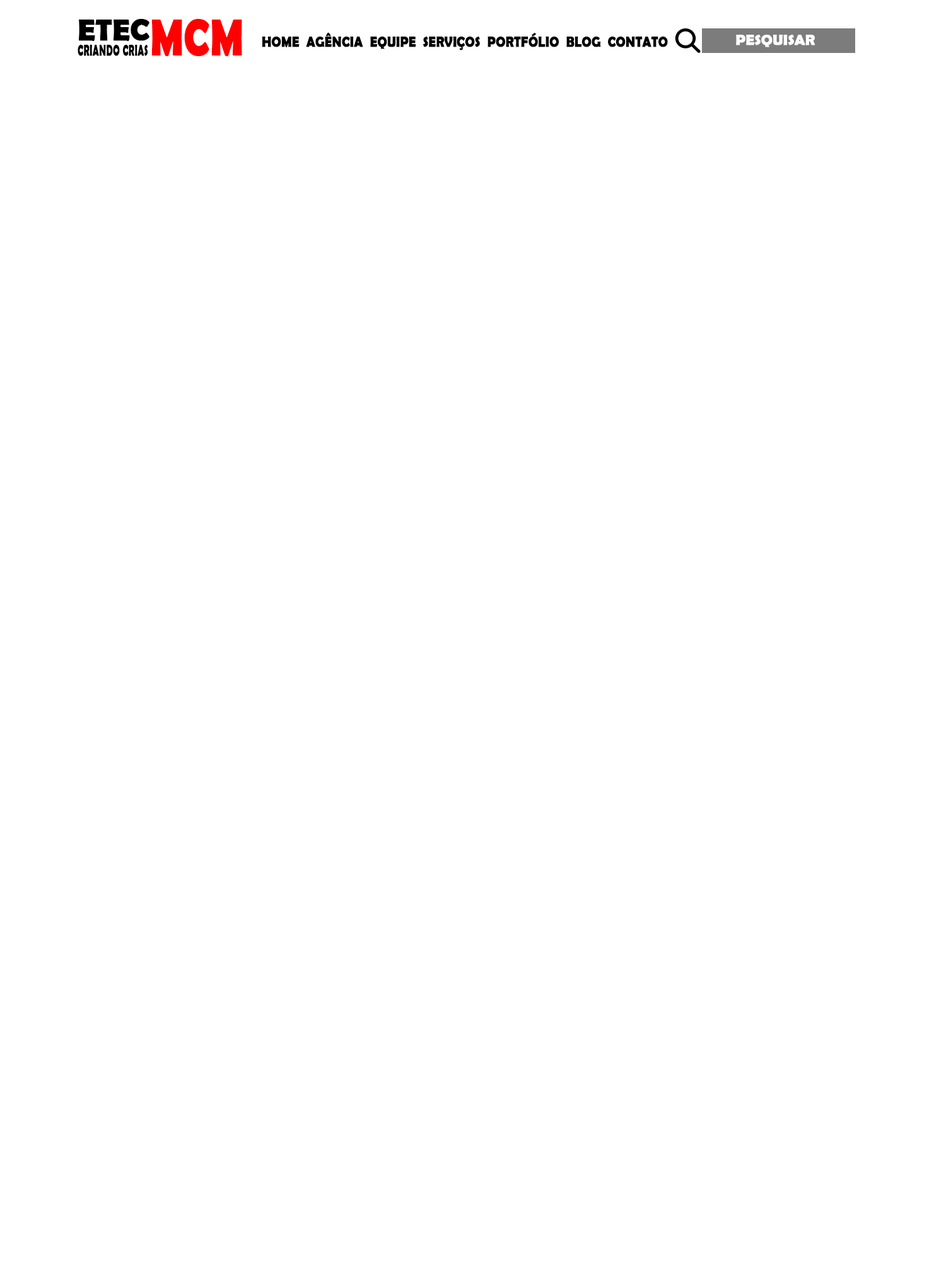
<style>
.page{position:relative;width:946px;height:1261px;background:#ffffff}
.page>*{position:absolute;margin:0}
.t1{font:30.3px "BerlinSansFBDemi-Bold";color:#000000;font-weight:bold}
.t2{font:51.8px "BerlinSansFBDemi-Bold";color:#ff0000;font-weight:bold;scale:0.77 1}
.t3{font:14.9px "BerlinSansFBDemi-Bold";color:#000000;font-weight:bold;scale:0.84 1}
.t4{font:14.9px "BerlinSansFBDemi-Bold";color:#ffffff;font-weight:bold}
.t5{font:15.1px "BerlinSansFBDemi-Bold";color:#7c7c7c;font-weight:bold}
.t6{font:15.7px "BerlinSansFBDemi-Bold";color:#000000;font-weight:bold;scale:0.58 1}
</style>
<div class="page">
<p class="t1" style="left:79px;top:19px;width:70px;height:22px">ETEC</p>
<p class="t2" style="left:151px;top:19px;width:91px;height:37px">MCM</p>
<p class="t3" style="left:262px;top:33px;width:406px;height:17px">HOME  AGÊNCIA  EQUIPE  SERVIÇOS  PORTFÓLIO  BLOG  CONTATO</p>
<p class="t4" style="left:736px;top:35px;width:85px;height:12px">PESQUISAR<span class="t5">S</span></p>
<p class="t6" style="left:78px;top:45px;width:70px;height:11px">CRIANDO CRIAS</p>
</div>
